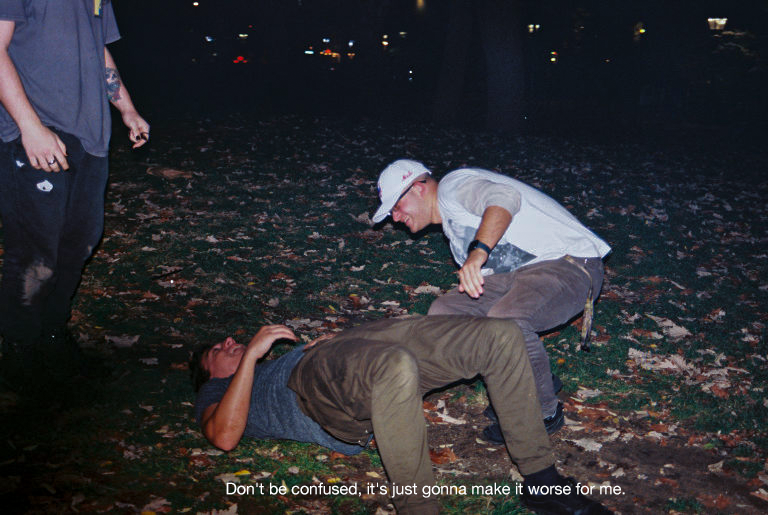
<style>
.page{position:relative;width:768px;height:515px}
.page>*{position:absolute;margin:0}
.t1{font:16px "HelveticaNeue";color:#ffffff}
</style>
<div class="page">
<p class="t1" style="left:226px;top:482px;width:399px;height:16px">Don't be confused, it's just gonna make it worse for me.</p>
</div>
